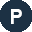
<style>
.page{position:relative;width:32px;height:32px;background:#1c3144}
.page>*{position:absolute;margin:0}
.t1{font:20.1px "Arial-BoldMT";color:#ffffff}
</style>
<div class="page">
<p class="t1" style="left:11px;top:9px;width:11px;height:15px">P</p>
</div>
